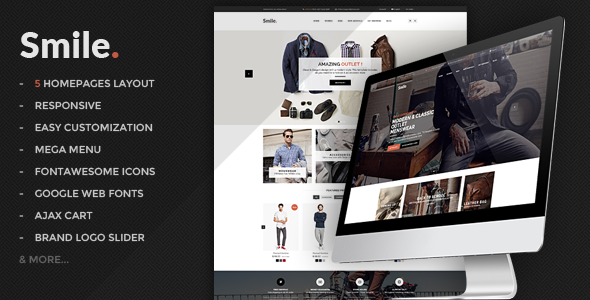
<style>
.page{position:relative;width:590px;height:300px}
.page>*{position:absolute;margin:0}
.t1{font:36px "Lato-Black";color:#e5e5e5}
.t2{font:10px/22px "Montserrat-Regular";color:#dddddd}
.t3{font:10px/22px "Montserrat-Regular";color:#d6644a}
.t4{font:10px/22px "Montserrat-Regular";color:#6c6c6c}
</style>
<div class="page">
<p class="t1" style="left:20px;top:31px;width:99px;height:27px">Smile.</p>
<p class="t2" style="left:19px;top:79px;width:136px;height:185px">-    <span class="t3">5</span> HOMEPAGES LAYOUT<br>-    RESPONSIVE<br>-    EASY CUSTOMIZATION<br>-    MEGA MENU<br>-    FONTAWESOME ICONS<br>-    GOOGLE WEB FONTS<br>-    AJAX CART<br>-    BRAND LOGO SLIDER<br><span class="t4">&amp; MORE...</span></p>
</div>
